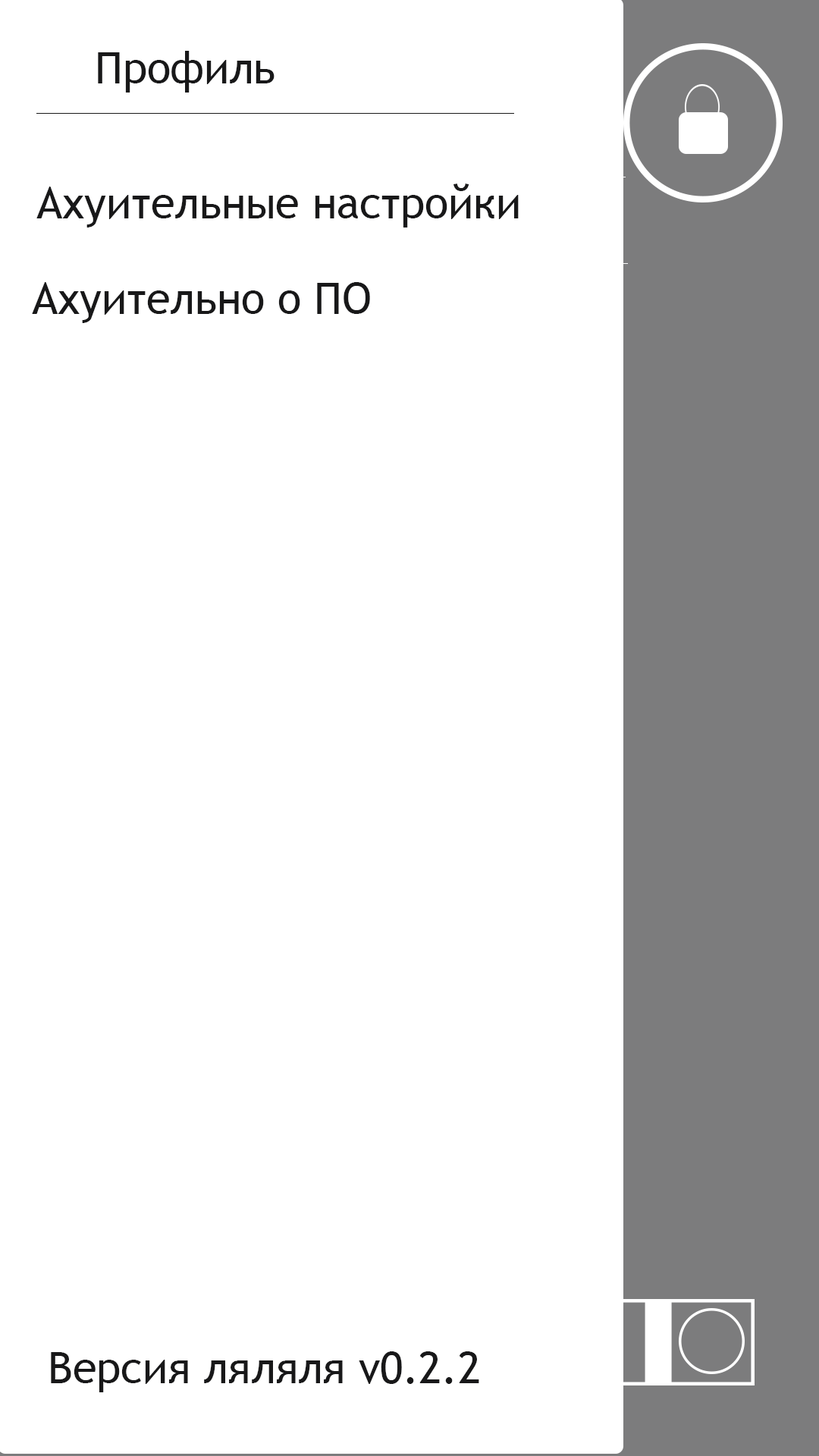
<style>
.page{position:relative;width:819px;height:1456px;background:#ffffff}
.page>*{position:absolute;margin:0}
.t1{font:43.6px "TrebuchetMS";color:#181819}
</style>
<div class="page">
<p class="t1" style="left:98px;top:51px;width:177px;height:42px">Профиль</p>
<p class="t1" style="left:36px;top:184px;width:483px;height:43px">Ахуительные настройки</p>
<p class="t1" style="left:32px;top:282px;width:338px;height:41px">Ахуительно о ПО</p>
<p class="t1" style="left:51px;top:1351px;width:428px;height:41px">Версия ляляля v0.2.2</p>
</div>
